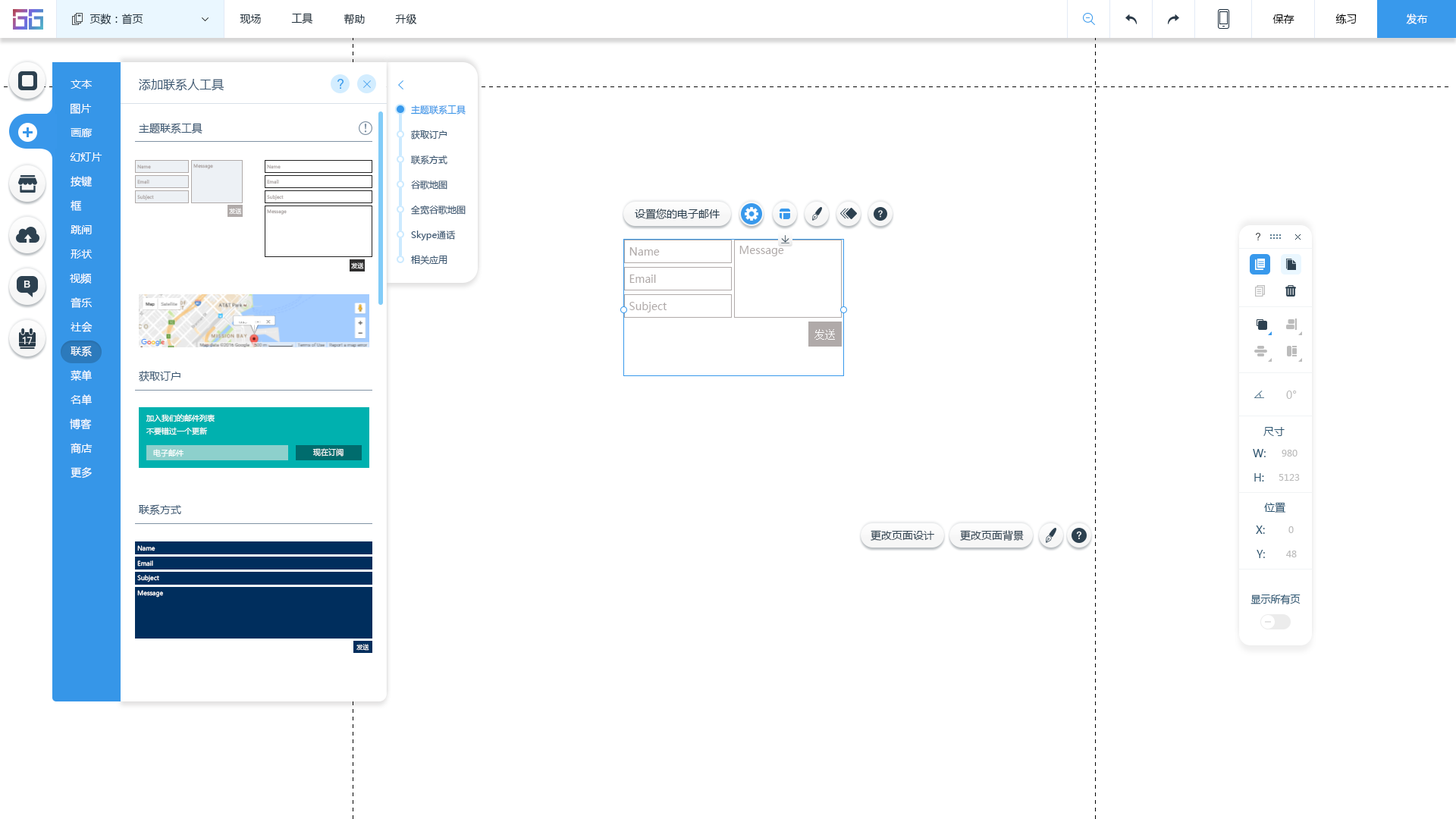
<style>
.page{position:relative;width:1456px;height:819px;background:#ffffff}
.page>*{position:absolute;margin:0}
.t1{font:10.6px "MicrosoftYaHei";color:#20303c}
.t2{font:10.6px "MicrosoftYaHei";color:#000000}
.t3{font:10.6px "MicrosoftYaHei";color:#ffffff}
.t4{font:12.1px "MicrosoftYaHei";color:#395671}
.t5{font:9.1px "MicrosoftYaHei";color:#3696e8}
.t6{font:10.6px "MicrosoftYaHei";color:#395671}
.t7{font:9.1px "MicrosoftYaHei";color:#395671}
.t8{font:4.5px "MicrosoftYaHei";color:#b0aaa9}
.t9{font:6.1px "MicrosoftYaHei";color:#ffffff}
.t10{font:10.6px "MicrosoftYaHei";color:#2d4150}
.t11{font:10.6px "MicrosoftYaHei";color:#b0aaa9}
.t12{font:10.6px "SimSun";color:#ffffff}
.t13{font:10.6px "MicrosoftYaHei";color:#bcbcbc}
.t14{font:7.6px "MicrosoftYaHei";color:#ffffff}
.t15{font:10.6px "MicrosoftYaHei";color:#2b5672}
.t16{font:9.1px "MicrosoftYaHei";color:#bcbcbc}
.t17{font:9.9px "MicrosoftYaHei";color:#2b5672}
</style>
<div class="page">
<p class="t1" style="left:89px;top:14px;width:54px;height:11px">页数：首页</p>
<p class="t1" style="left:240px;top:14px;width:21px;height:10px">现场</p>
<p class="t1" style="left:291px;top:13px;width:22px;height:11px">工具</p>
<p class="t1" style="left:344px;top:14px;width:21px;height:11px">帮助</p>
<p class="t1" style="left:395px;top:14px;width:22px;height:10px">升级</p>
<p class="t2" style="left:1272px;top:14px;width:22px;height:10px">保存</p>
<p class="t2" style="left:1335px;top:14px;width:22px;height:10px">练习</p>
<p class="t3" style="left:1406px;top:14px;width:22px;height:10px">发布</p>
<p class="t3" style="left:71px;top:80px;width:21px;height:9px">文本</p>
<p class="t4" style="left:139px;top:79px;width:85px;height:12px">添加联系人工具</p>
<p class="t3" style="left:71px;top:103px;width:21px;height:12px">图片</p>
<p class="t5" style="left:411px;top:105px;width:55px;height:10px">主题联系工具</p>
<p class="t6" style="left:139px;top:123px;width:63px;height:10px">主题联系工具</p>
<p class="t3" style="left:71px;top:128px;width:22px;height:9px">画廊</p>
<p class="t7" style="left:411px;top:130px;width:36px;height:10px">获取订户</p>
<p class="t3" style="left:70px;top:152px;width:32px;height:10px">幻灯片</p>
<p class="t7" style="left:410px;top:155px;width:37px;height:10px">联系方式</p>
<p class="t8" style="left:137px;top:165px;width:14px;height:4px">Name</p>
<p class="t8" style="left:193px;top:164px;width:20px;height:5px">Message</p>
<p class="t8" style="left:267px;top:165px;width:14px;height:4px">Name</p>
<p class="t3" style="left:71px;top:176px;width:21px;height:11px">按键</p>
<p class="t8" style="left:137px;top:180px;width:12px;height:4px">Email</p>
<p class="t8" style="left:267px;top:180px;width:12px;height:4px">Email</p>
<p class="t7" style="left:411px;top:180px;width:36px;height:10px">谷歌地图</p>
<p class="t8" style="left:137px;top:195px;width:17px;height:5px">Subject</p>
<p class="t8" style="left:267px;top:195px;width:17px;height:5px">Subject</p>
<p class="t3" style="left:71px;top:200px;width:11px;height:11px">框</p>
<p class="t9" style="left:229px;top:208px;width:13px;height:7px">发送</p>
<p class="t8" style="left:267px;top:209px;width:20px;height:6px">Message</p>
<p class="t7" style="left:411px;top:206px;width:55px;height:9px">全宽谷歌地图</p>
<p class="t10" style="left:635px;top:209px;width:85px;height:10px">设置您的电子邮件</p>
<p class="t3" style="left:71px;top:225px;width:21px;height:9px">跳闸</p>
<p class="t7" style="left:411px;top:231px;width:45px;height:9px">Skype通话</p>
<p class="t11" style="left:739px;top:246px;width:45px;height:10px">Message</p>
<p class="t3" style="left:71px;top:249px;width:22px;height:10px">形状</p>
<p class="t7" style="left:411px;top:256px;width:36px;height:9px">相关应用</p>
<p class="t11" style="left:629px;top:247px;width:31px;height:9px">Name</p>
<p class="t9" style="left:351px;top:262px;width:13px;height:7px">发送</p>
<p class="t3" style="left:70px;top:273px;width:22px;height:11px">视频</p>
<p class="t11" style="left:629px;top:275px;width:27px;height:8px">Email</p>
<p class="t3" style="left:71px;top:297px;width:21px;height:11px">音乐</p>
<p class="t11" style="left:629px;top:302px;width:38px;height:10px">Subject</p>
<p class="t3" style="left:71px;top:322px;width:22px;height:10px">社会</p>
<p class="t12" style="left:814px;top:329px;width:21px;height:11px">发送</p>
<p class="t3" style="left:71px;top:346px;width:21px;height:10px">联系</p>
<p class="t3" style="left:71px;top:370px;width:21px;height:11px">菜单</p>
<p class="t6" style="left:139px;top:371px;width:41px;height:10px">获取订户</p>
<p class="t3" style="left:71px;top:394px;width:21px;height:11px">名单</p>
<p class="t13" style="left:1286px;top:391px;width:11px;height:8px">0°</p>
<p class="t3" style="left:70px;top:419px;width:22px;height:11px">博客</p>
<p class="t14" style="left:146px;top:414px;width:69px;height:21px">加入我们的邮件列表<br>不要错过一个更新</p>
<p class="t15" style="left:1263px;top:427px;width:22px;height:9px">尺寸</p>
<p class="t3" style="left:71px;top:443px;width:22px;height:10px">商店</p>
<p class="t14" style="left:153px;top:449px;width:31px;height:8px">电子邮件</p>
<p class="t14" style="left:312px;top:448px;width:32px;height:9px">现在订阅</p>
<p class="t15" style="left:1253px;top:449px;width:13px;height:8px">W:</p>
<p class="t16" style="left:1282px;top:450px;width:15px;height:7px">980</p>
<p class="t3" style="left:71px;top:467px;width:21px;height:12px">更多</p>
<p class="t15" style="left:1254px;top:473px;width:10px;height:9px">H:</p>
<p class="t16" style="left:1279px;top:474px;width:21px;height:7px">5123</p>
<p class="t6" style="left:139px;top:504px;width:42px;height:11px">联系方式</p>
<p class="t15" style="left:1264px;top:502px;width:22px;height:11px">位置</p>
<p class="t10" style="left:871px;top:530px;width:63px;height:11px">更改页面设计</p>
<p class="t10" style="left:960px;top:530px;width:64px;height:11px">更改页面背景</p>
<p class="t15" style="left:1256px;top:526px;width:9px;height:8px">X:</p>
<p class="t16" style="left:1288px;top:526px;width:6px;height:7px">0</p>
<p class="t9" style="left:137px;top:545px;width:18px;height:6px">Name</p>
<p class="t15" style="left:1257px;top:550px;width:8px;height:8px">Y:</p>
<p class="t16" style="left:1286px;top:551px;width:11px;height:6px">48</p>
<p class="t9" style="left:137px;top:560px;width:16px;height:6px">Email</p>
<p class="t9" style="left:137px;top:575px;width:22px;height:7px">Subject</p>
<p class="t9" style="left:137px;top:590px;width:26px;height:8px">Message</p>
<p class="t17" style="left:1250px;top:594px;width:51px;height:10px">显示所有页</p>
<p class="t9" style="left:356px;top:644px;width:13px;height:7px">发送</p>
</div>
